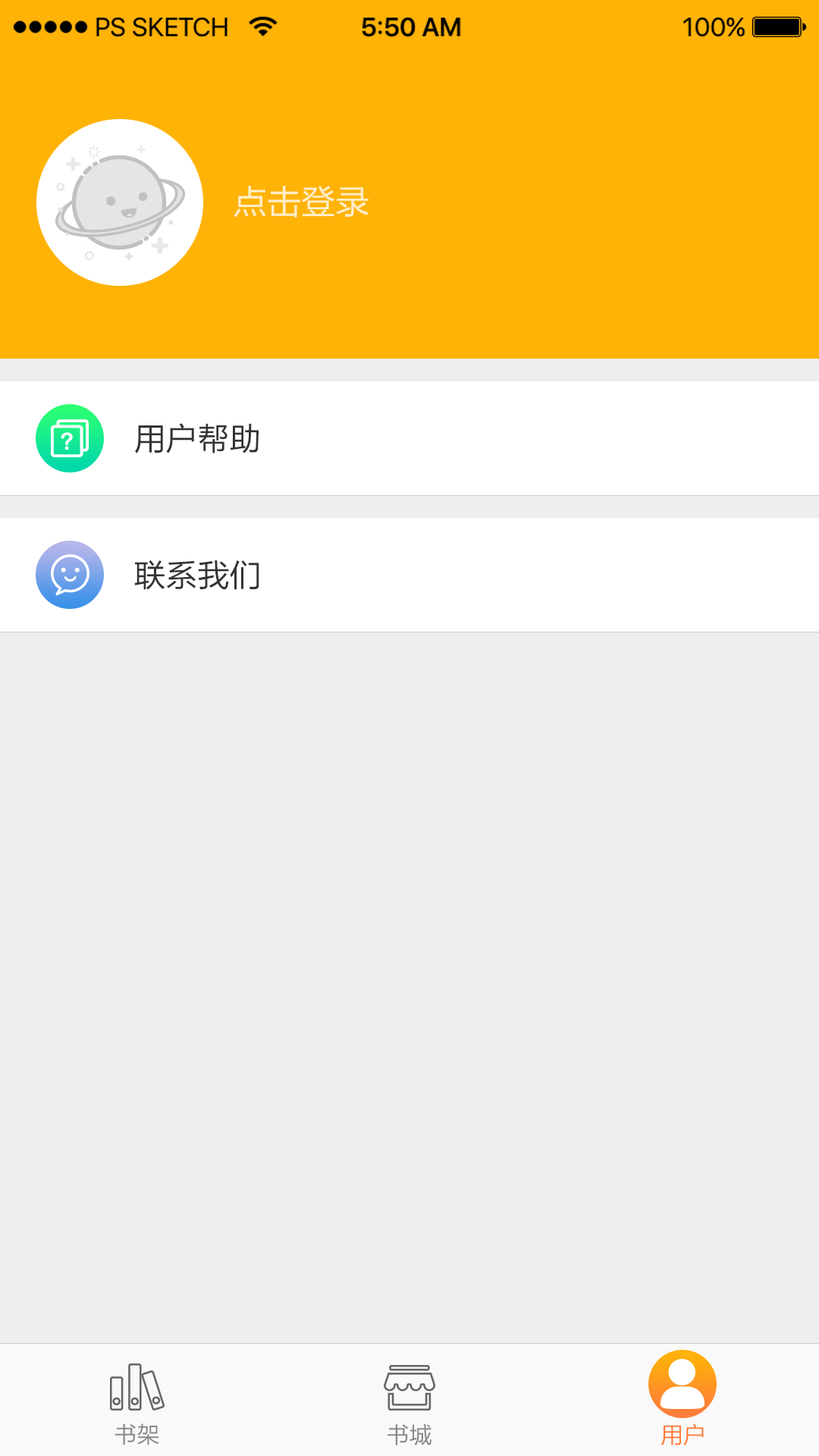
<style>
.page{position:relative;width:819px;height:1456px;background:#eeeeee}
.page>*{position:absolute;margin:0}
.t1{font:34.1px "FZLTHK--GBK1-0";color:#ffeec7}
.t2{font:31.8px "FZLTHK--GBK1-0";color:#333333}
.t3{font:22.7px "FZLTHK--GBK1-0";color:#888888}
.t4{font:22.7px "FZLTHK--GBK1-0";color:#ff7e3a}
</style>
<div class="page">
<p class="t1" style="left:234px;top:186px;width:135px;height:32px">点击登录</p>
<p class="t2" style="left:135px;top:423px;width:124px;height:30px">用户帮助</p>
<p class="t2" style="left:134px;top:560px;width:125px;height:30px">联系我们</p>
<p class="t3" style="left:115px;top:1423px;width:44px;height:22px">书架</p>
<p class="t3" style="left:388px;top:1424px;width:43px;height:21px">书城</p>
<p class="t4" style="left:661px;top:1423px;width:43px;height:22px">用户</p>
</div>
